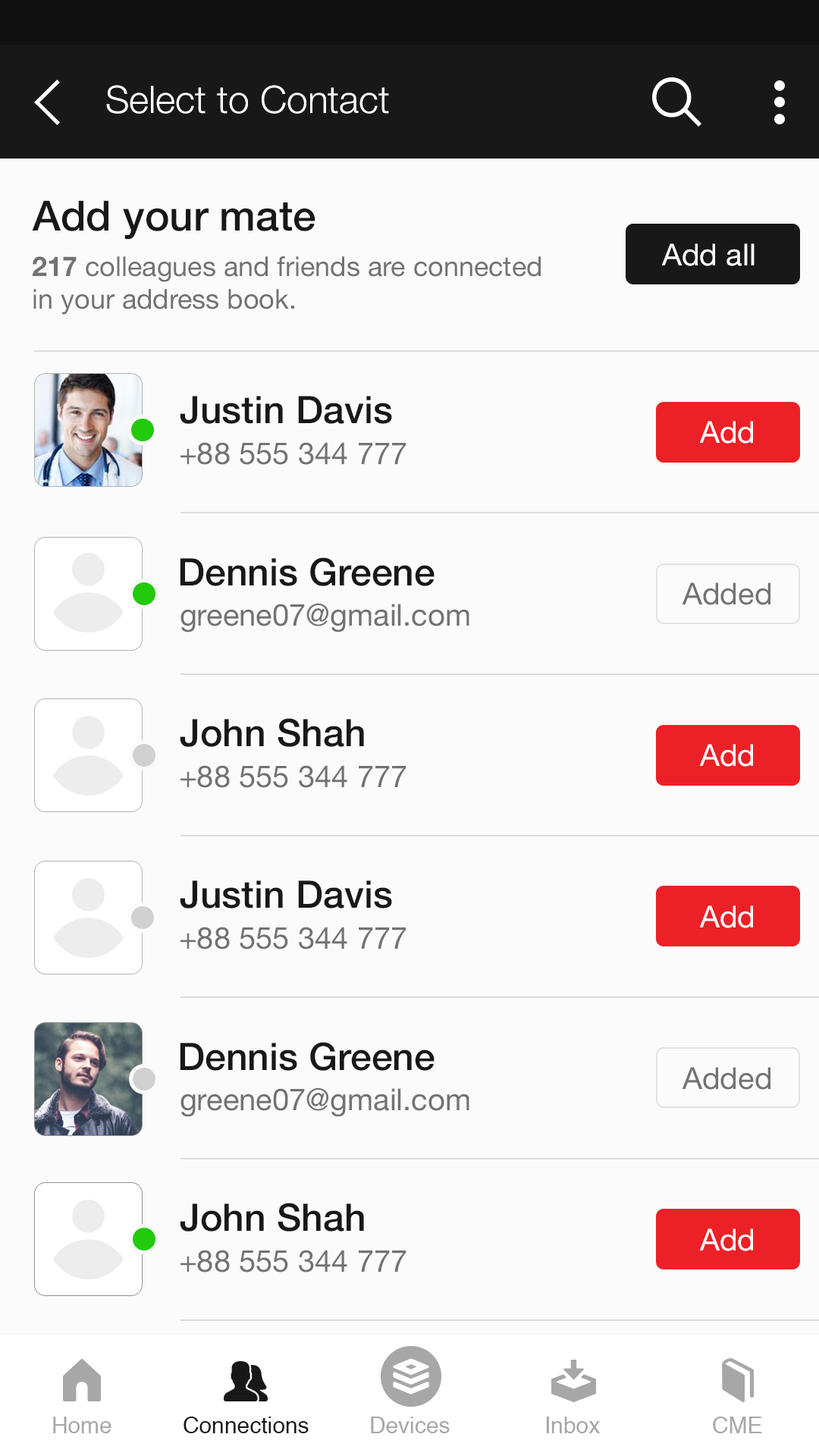
<style>
.page{position:relative;width:819px;height:1456px;background:#fbfbfb}
.page>*{position:absolute;margin:0}
.t1{font:37.9px "HelveticaNeue-Light";color:#ffffff}
.t2{font:41.7px "HelveticaNeue-Medium";color:#181818}
.t3{font:30.3px "HelveticaNeue";color:#ffffff}
.t4{font:27.3px "HelveticaNeue";color:#727272}
.t5{font:27.3px "HelveticaNeue-Bold";color:#727272}
.t6{font:37.9px "HelveticaNeue-Medium";color:#181818}
.t7{font:30.3px "HelveticaNeue";color:#727272}
.t8{font:22.7px "Helvetica";color:#a7a7a7}
.t9{font:22.7px "Helvetica";color:#181818}
</style>
<div class="page">
<p class="t1" style="left:106px;top:85px;width:283px;height:29px">Select to Contact</p>
<p class="t2" style="left:32px;top:200px;width:283px;height:40px">Add your mate</p>
<p class="t3" style="left:661px;top:243px;width:94px;height:23px">Add all</p>
<p class="t4" style="left:32px;top:256px;width:509px;height:59px"><span class="t5">217</span> colleagues and friends are connected<br>in your address book.</p>
<p class="t6" style="left:180px;top:396px;width:212px;height:28px">Justin Davis</p>
<p class="t3" style="left:699px;top:421px;width:54px;height:23px">Add</p>
<p class="t7" style="left:180px;top:442px;width:226px;height:23px">+88 555 344 777</p>
<p class="t6" style="left:180px;top:557px;width:255px;height:29px">Dennis Greene</p>
<p class="t7" style="left:682px;top:582px;width:88px;height:23px">Added</p>
<p class="t7" style="left:180px;top:603px;width:289px;height:29px">greene07@gmail.com</p>
<p class="t6" style="left:180px;top:718px;width:184px;height:29px">John Shah</p>
<p class="t3" style="left:699px;top:744px;width:54px;height:23px">Add</p>
<p class="t7" style="left:180px;top:765px;width:226px;height:23px">+88 555 344 777</p>
<p class="t6" style="left:180px;top:880px;width:212px;height:28px">Justin Davis</p>
<p class="t3" style="left:699px;top:905px;width:54px;height:23px">Add</p>
<p class="t7" style="left:180px;top:927px;width:226px;height:22px">+88 555 344 777</p>
<p class="t6" style="left:180px;top:1042px;width:255px;height:29px">Dennis Greene</p>
<p class="t7" style="left:682px;top:1067px;width:88px;height:23px">Added</p>
<p class="t7" style="left:180px;top:1087px;width:289px;height:30px">greene07@gmail.com</p>
<p class="t6" style="left:180px;top:1203px;width:184px;height:29px">John Shah</p>
<p class="t3" style="left:699px;top:1228px;width:54px;height:23px">Add</p>
<p class="t7" style="left:180px;top:1250px;width:226px;height:22px">+88 555 344 777</p>
<p class="t8" style="left:53px;top:1417px;width:58px;height:16px">Home</p>
<p class="t9" style="left:184px;top:1417px;width:125px;height:16px">Connections</p>
<p class="t8" style="left:371px;top:1417px;width:79px;height:16px">Devices</p>
<p class="t8" style="left:546px;top:1417px;width:54px;height:16px">Inbox</p>
<p class="t8" style="left:713px;top:1417px;width:48px;height:16px">CME</p>
</div>
